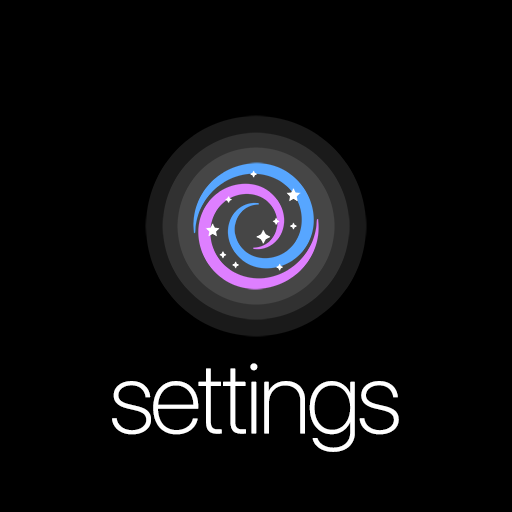
<style>
.page{position:relative;width:512px;height:512px;background:#000000}
.page>*{position:absolute;margin:0}
.t1{font:100px "SFProDisplay-Thin";letter-spacing:-0.04em;color:#ffffff;font-weight:bold}
</style>
<div class="page">
<p class="t1" style="left:112px;top:363px;width:287px;height:89px">settings</p>
</div>
